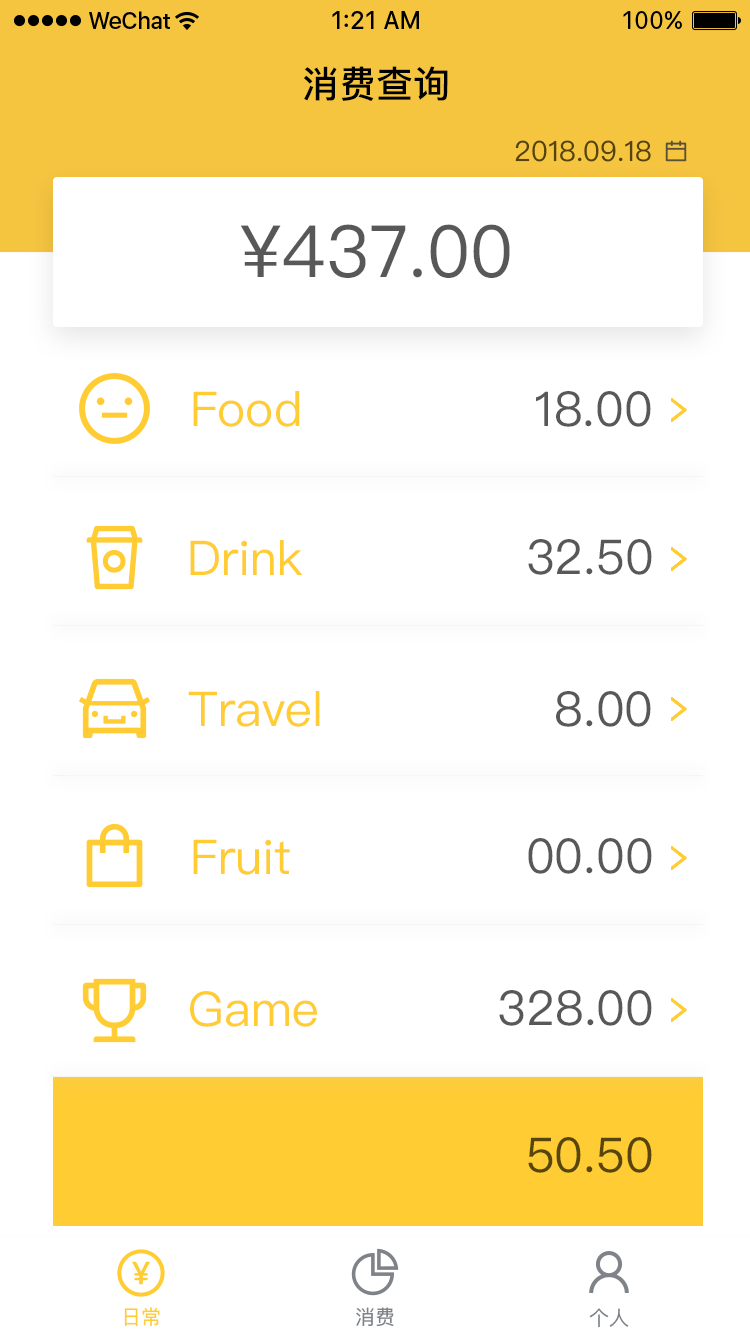
<style>
.page{position:relative;width:750px;height:1334px;background:#ffffff}
.page>*{position:absolute;margin:0}
.t1{font:37px "PingFangSC-Medium";color:#000000}
.t2{font:28px "PingFangSC-Regular";color:#54420f}
.t3{font:72px "PingFangSC-Regular";color:#585858}
.t4{font:48px "PingFangSC-Regular";color:#ffcc33}
.t5{font:48px "PingFangSC-Regular";color:#585858}
.t6{font:48px "PingFangSC-Regular";color:#58450c}
.t7{font:20px "PingFangSC-Regular";color:#ffcc33}
.t8{font:20px "PingFangSC-Regular";color:#7f8389}
</style>
<div class="page">
<p class="t1" style="left:303px;top:66px;width:145px;height:35px">消费查询</p>
<p class="t2" style="left:515px;top:140px;width:136px;height:22px">2018.09.18</p>
<p class="t3" style="left:240px;top:224px;width:270px;height:54px">¥437.00</p>
<p class="t4" style="left:193px;top:391px;width:107px;height:36px">Food</p>
<p class="t5" style="left:536px;top:391px;width:115px;height:36px">18.00</p>
<p class="t4" style="left:190px;top:540px;width:113px;height:35px">Drink</p>
<p class="t5" style="left:528px;top:539px;width:124px;height:36px">32.50</p>
<p class="t4" style="left:188px;top:691px;width:132px;height:36px">Travel</p>
<p class="t5" style="left:556px;top:691px;width:95px;height:36px">8.00</p>
<p class="t4" style="left:193px;top:839px;width:97px;height:36px">Fruit</p>
<p class="t5" style="left:528px;top:838px;width:124px;height:36px">00.00</p>
<p class="t5" style="left:499px;top:990px;width:153px;height:36px">328.00</p>
<p class="t4" style="left:190px;top:991px;width:127px;height:36px">Game</p>
<p class="t6" style="left:528px;top:1137px;width:124px;height:36px">50.50</p>
<p class="t7" style="left:124px;top:1307px;width:36px;height:20px">日常</p>
<p class="t8" style="left:356px;top:1307px;width:38px;height:20px">消费</p>
<p class="t8" style="left:589px;top:1308px;width:40px;height:20px">个人</p>
</div>
